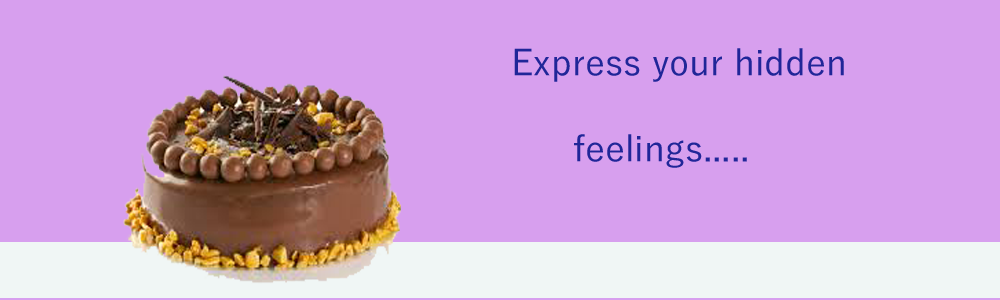
<style>
.page{position:relative;width:1000px;height:300px;background:#d79fee}
.page>*{position:absolute;margin:0}
.t1{font:36px "YuGothic-Medium";color:#202698}
</style>
<div class="page">
<p class="t1" style="left:514px;top:48px;width:330px;height:120px">Express your hidden <br><br>      feelings.....</p>
</div>
